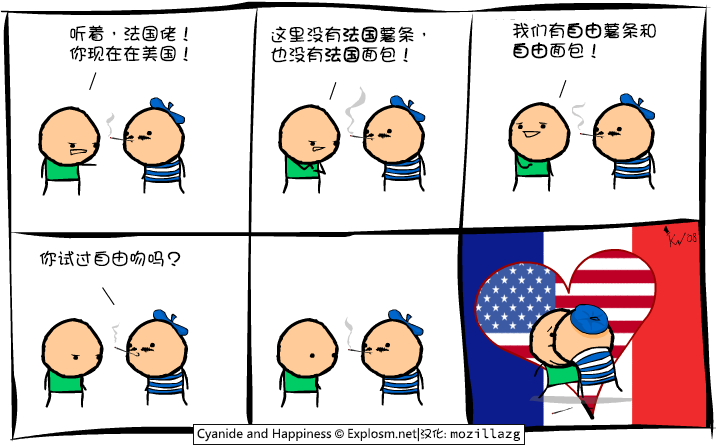
<style>
.page{position:relative;width:716px;height:445px;background:#ffffff}
.page>*{position:absolute;margin:0}
.t1{font:18px/20px "DFGirl";color:#000000}
.t2{font:18px/20px "DFGirl";color:#000000;font-weight:bold}
.t3{font:18px "DFGirl";color:#000000}
</style>
<div class="page">
<p class="t1" style="left:69px;top:25px;width:119px;height:37px">听着，法国佬！<br>你现在在美国！</p>
<p class="t1" style="left:271px;top:26px;width:155px;height:37px">这里没有<span class="t2">法国</span>薯条，<br>也没有<span class="t2">法国</span>面包！</p>
<p class="t1" style="left:512px;top:22px;width:144px;height:37px">我们有<span class="t2">自由</span>薯条和<br><span class="t2">自由</span>面包！</p>
<p class="t3" style="left:39px;top:250px;width:142px;height:17px">你试过自由吻吗？</p>
</div>
